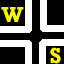
<style>
.page{position:relative;width:64px;height:64px;background:#000000}
.page>*{position:absolute;margin:0}
.t1{font:22px "Rockwell-Bold";letter-spacing:-0.16em;color:#f6fa00}
.t2{font:22px "Rockwell-Bold";letter-spacing:-0.16em;color:#faf600}
</style>
<div class="page">
<p class="t1" style="left:1px;top:7px;width:23px;height:15px">W</p>
<p class="t2" style="left:50px;top:47px;width:11px;height:17px">S</p>
</div>
